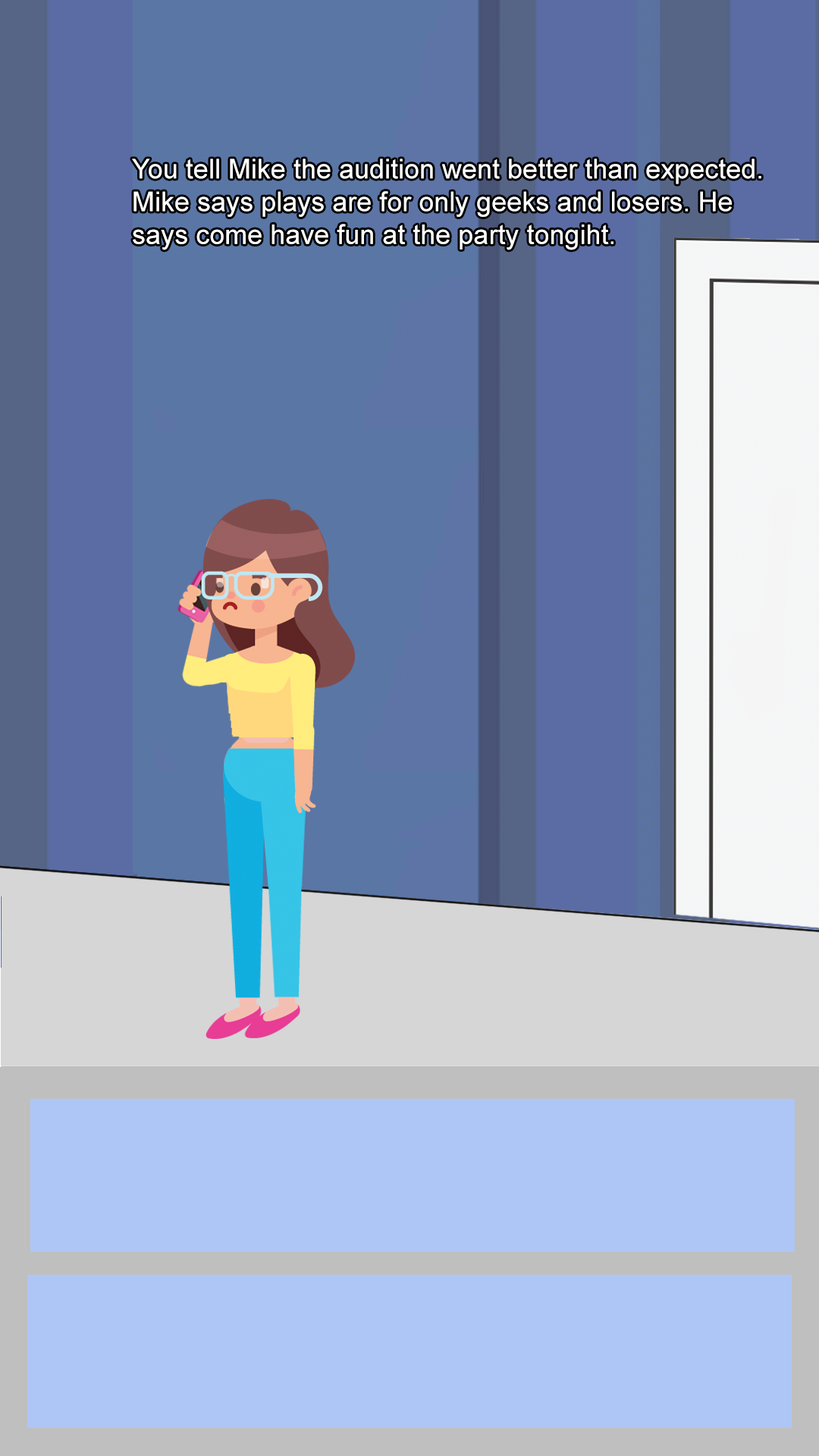
<style>
.page{position:relative;width:819px;height:1456px;background:#aec6f5}
.page>*{position:absolute;margin:0}
.t1{font:27.3px "ArialMT";color:#ffffff}
</style>
<div class="page">
<p class="t1" style="left:132px;top:158px;width:629px;height:92px">You tell Mike the audition went better than expected. Mike says plays are for only geeks and losers. He says come have fun at the party tongiht.</p>
</div>
